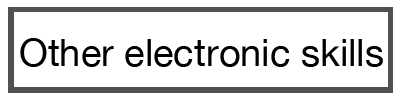
<style>
.page{position:relative;width:400px;height:100px;background:#ffffff}
.page>*{position:absolute;margin:0}
.t1{font:38px "HelveticaNeue";color:#000000}
</style>
<div class="page">
<p class="t1" style="left:20px;top:38px;width:363px;height:29px">Other electronic skills</p>
</div>
